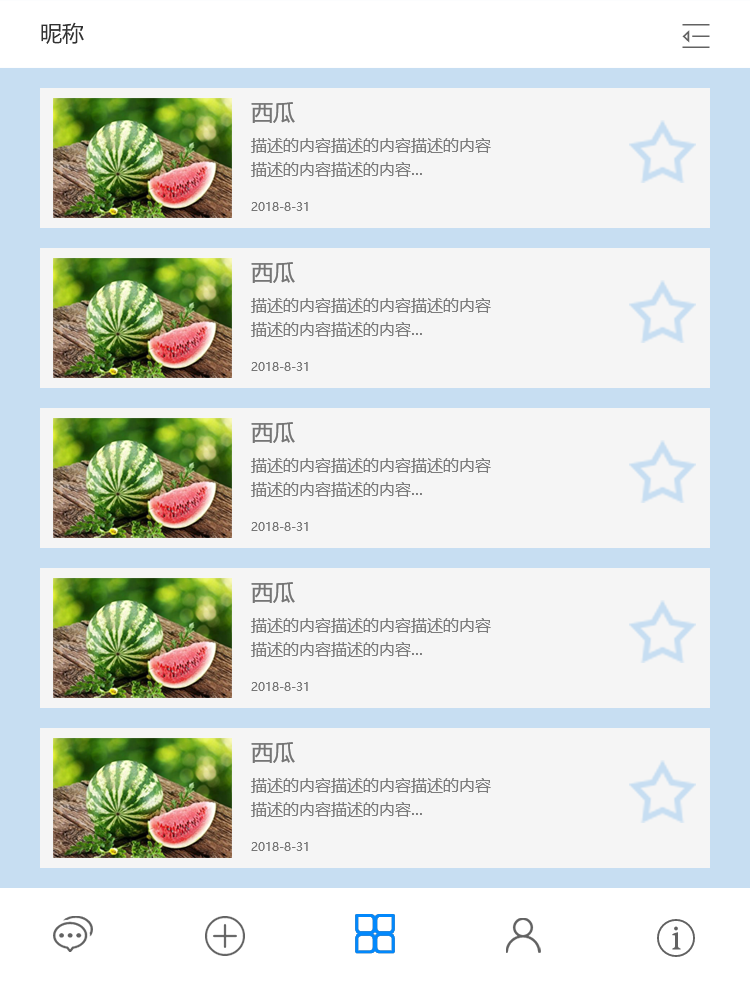
<style>
.page{position:relative;width:750px;height:986px;background:#f5f5f5}
.page>*{position:absolute;margin:0}
.t1{font:22px "MicrosoftYaHei";color:#323232;text-transform:uppercase}
.t2{font:16px/24px "MicrosoftYaHei";color:#7c7c7c}
.t3{font:22px/36px "MicrosoftYaHei";color:#757575}
.t4{font:12px "MicrosoftYaHei";color:#757575}
</style>
<div class="page">
<p class="t1" style="left:41px;top:22px;width:43px;height:22px">昵称</p>
<p class="t2" style="left:251px;top:102px;width:240px;height:109px"><span class="t3">西瓜<br></span>描述的内容描述的内容描述的内容<br>描述的内容描述的内容...<br><br><span class="t4">2018-8-31</span></p>
<p class="t2" style="left:251px;top:262px;width:240px;height:109px"><span class="t3">西瓜<br></span>描述的内容描述的内容描述的内容<br>描述的内容描述的内容...<br><br><span class="t4">2018-8-31</span></p>
<p class="t2" style="left:251px;top:422px;width:240px;height:109px"><span class="t3">西瓜<br></span>描述的内容描述的内容描述的内容<br>描述的内容描述的内容...<br><br><span class="t4">2018-8-31</span></p>
<p class="t2" style="left:251px;top:582px;width:240px;height:109px"><span class="t3">西瓜<br></span>描述的内容描述的内容描述的内容<br>描述的内容描述的内容...<br><br><span class="t4">2018-8-31</span></p>
<p class="t2" style="left:251px;top:742px;width:240px;height:109px"><span class="t3">西瓜<br></span>描述的内容描述的内容描述的内容<br>描述的内容描述的内容...<br><br><span class="t4">2018-8-31</span></p>
</div>
